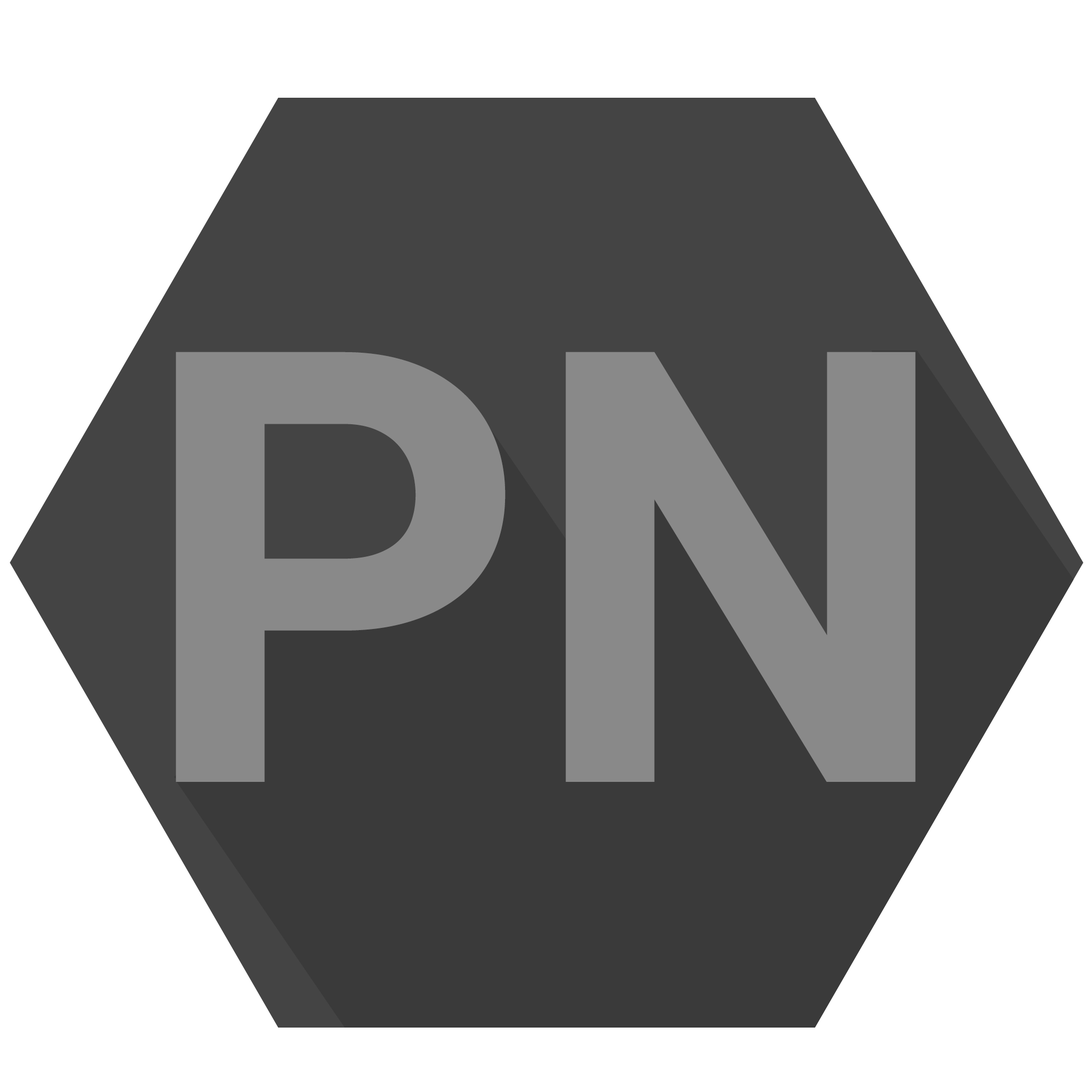
<style>
.page{position:relative;width:1092px;height:1092px;background:#ffffff}
.page>*{position:absolute;margin:0}
.t1{font:604.4px "Roboto-Bold";color:#898989}
</style>
<div class="page">
<p class="t1" style="left:176px;top:352px;width:740px;height:430px">PN</p>
</div>
